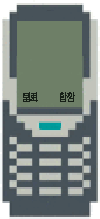
<style>
.page{position:relative;width:100px;height:219px;background:#6e7f67}
.page>*{position:absolute;margin:0}
.t1{font:10.6px "AdobeGothicStd-Bold";color:#172017;scale:0.75 1}
</style>
<div class="page">
<p class="t1" style="left:23px;top:92px;width:14px;height:10px">닫기</p>
<p class="t1" style="left:23px;top:92px;width:15px;height:10px">뒤로</p>
<p class="t1" style="left:60px;top:92px;width:14px;height:10px">확인</p>
<p class="t1" style="left:60px;top:92px;width:15px;height:10px">답장</p>
</div>
